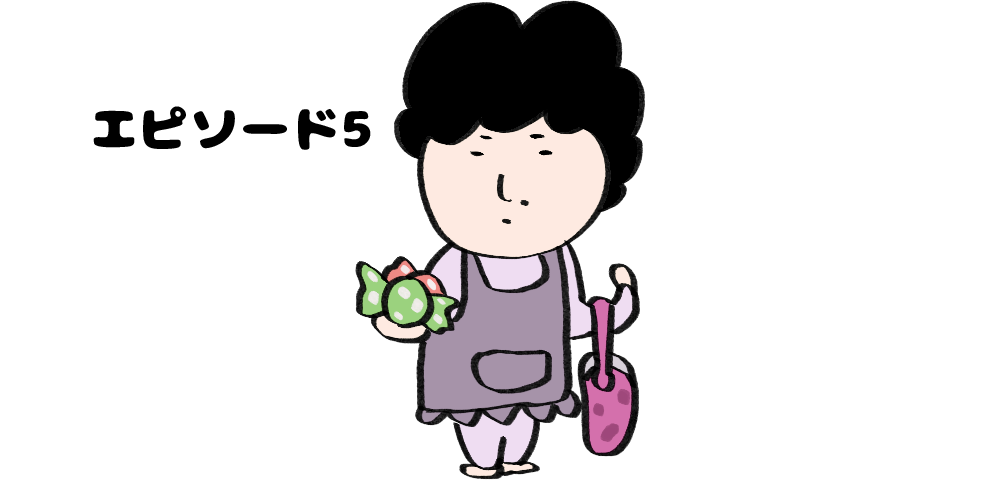
<style>
.page{position:relative;width:1000px;height:480px;background:#ffffff}
.page>*{position:absolute;margin:0}
.t1{font:50px "07NikumaruFont";letter-spacing:0.08em;color:#000000}
</style>
<div class="page">
<p class="t1" style="left:93px;top:106px;width:278px;height:44px">エピソード5</p>
</div>
